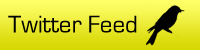
<style>
.page{position:relative;width:200px;height:50px}
.page>*{position:absolute;margin:0}
.t1{font:25px "EurostileRegular";color:#020202}
</style>
<div class="page">
<p class="t1" style="left:8px;top:15px;width:129px;height:18px">Twitter Feed</p>
</div>
